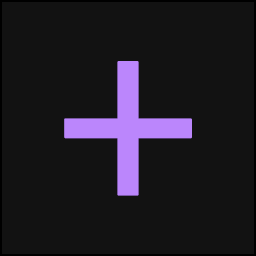
<style>
.page{position:relative;width:256px;height:256px;background:#121212}
.page>*{position:absolute;margin:0}
.t1{font:262px "NotoSansJP-Regular";color:#bb86fc;font-weight:bold}
</style>
<div class="page">
<p class="t1" style="left:64px;top:61px;width:128px;height:135px">+</p>
</div>
